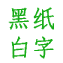
<style>
.page{position:relative;width:63px;height:63px;background:#ffffff}
.page>*{position:absolute;margin:0}
.t1{font:24px "·ÂËÎ-Regular";letter-spacing:0.025em;color:#1aad19;font-weight:bold}
</style>
<div class="page">
<p class="t1" style="left:8px;top:7px;width:46px;height:52px;text-align:center">黑纸<br>白字</p>
</div>
